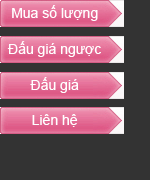
<style>
.page{position:relative;width:150px;height:180px;background:#333333}
.page>*{position:absolute;margin:0}
.t1{font:14px "ArialMT";color:#ffffff}
</style>
<div class="page">
<p class="t1" style="left:12px;top:5px;width:86px;height:16px">Mua số lượng</p>
<p class="t1" style="left:7px;top:41px;width:94px;height:16px">Đấu giá ngược</p>
<p class="t1" style="left:30px;top:77px;width:49px;height:16px">Đấu giá</p>
<p class="t1" style="left:32px;top:114px;width:46px;height:13px">Liên hệ</p>
</div>
